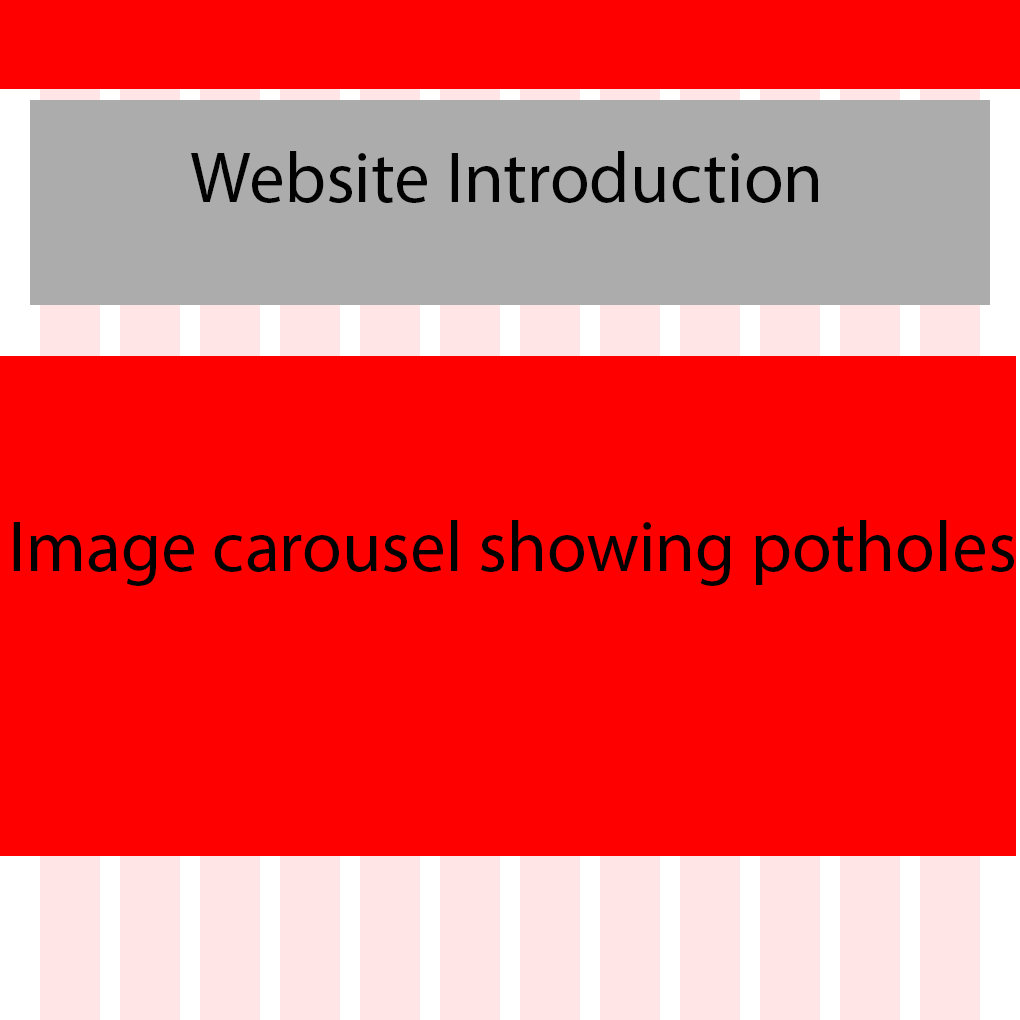
<style>
.page{position:relative;width:1020px;height:1020px;background:#ff0000}
.page>*{position:absolute;margin:0}
.t1{font:72px "MyriadPro-Regular";color:#020202}
</style>
<div class="page">
<p class="t1" style="left:191px;top:151px;width:627px;height:52px">Website Introduction</p>
<p class="t1" style="left:13px;top:520px;width:1001px;height:66px">Image carousel showing potholes</p>
</div>
